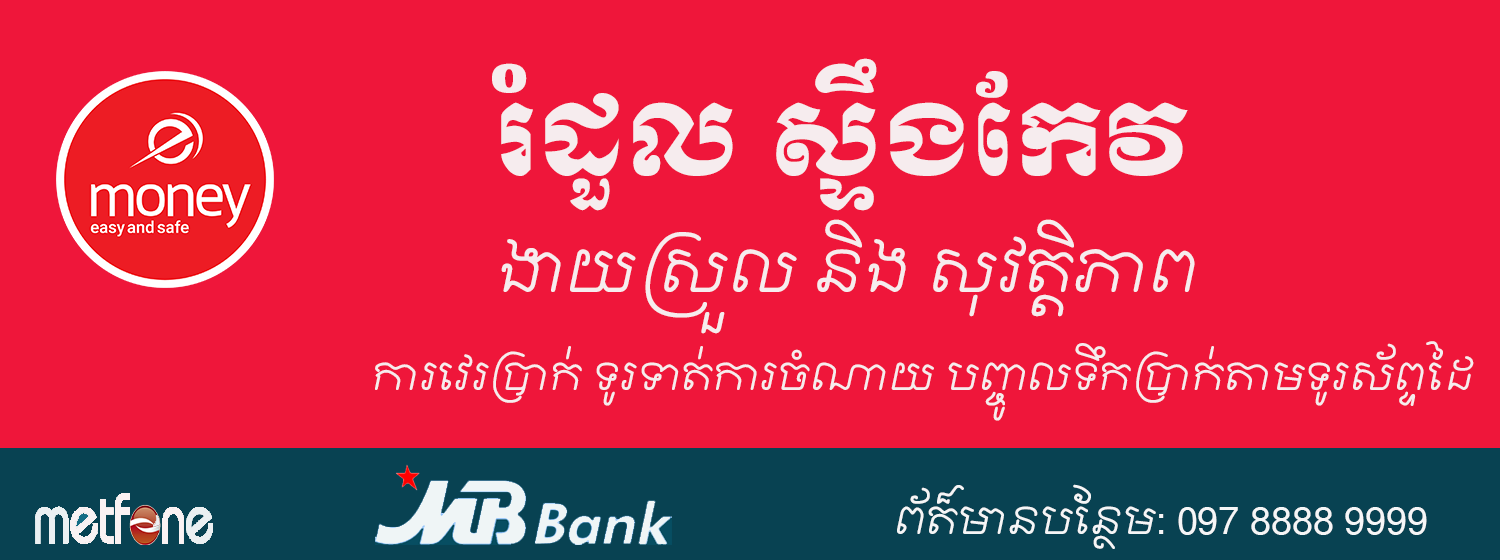
<style>
.page{position:relative;width:1500px;height:560px;background:#ef163a}
.page>*{position:absolute;margin:0}
.t1{font:100px "KhmerOSMuolLight";color:#f6ecee}
.t2{font:58.3px "KhmerOSfreehand";color:#f6ecee}
.t3{font:37.5px "KhmerOSfreehand";color:#f6ecee}
.t4{font:37.5px "KhmerOSfreehand";color:#f5f6f7}
</style>
<div class="page">
<p class="t1" style="left:492px;top:58px;width:696px;height:153px">រំដួល ស្ទឹងកែវ</p>
<p class="t2" style="left:501px;top:219px;width:694px;height:115px">ងាយស្រួល និង​ សុវត្តិភាព</p>
<p class="t3" style="left:375px;top:341px;width:1099px;height:80px">ការ​វេរប្រាក់ ទូរទាត់ការចំណាយ បញ្ចូលទឹកប្រាក់តាមទូរស័ព្ទដៃ</p>
<p class="t4" style="left:897px;top:484px;width:530px;height:65px">ព័ត៏មានបន្ថែម: 097 8888 9999</p>
</div>
